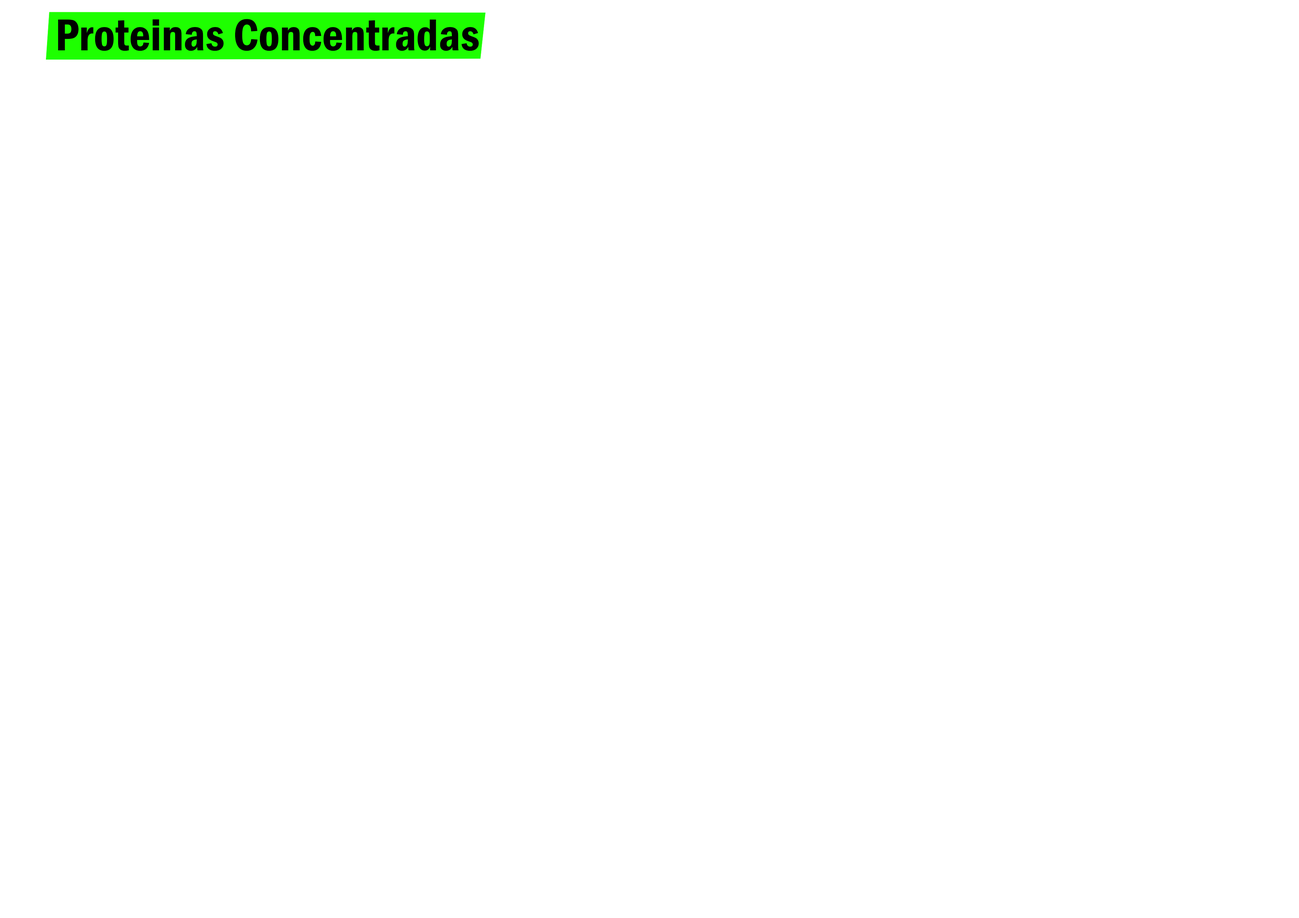
<style>
.page{position:relative;width:1299px;height:918px;background:#ffffff}
.page>*{position:absolute;margin:0}
.t1{font:46.3px "FranklinGothic-DemiCond";color:#000000}
</style>
<div class="page">
<p class="t1" style="left:58px;top:19px;width:421px;height:32px">Proteinas Concentradas</p>
</div>
